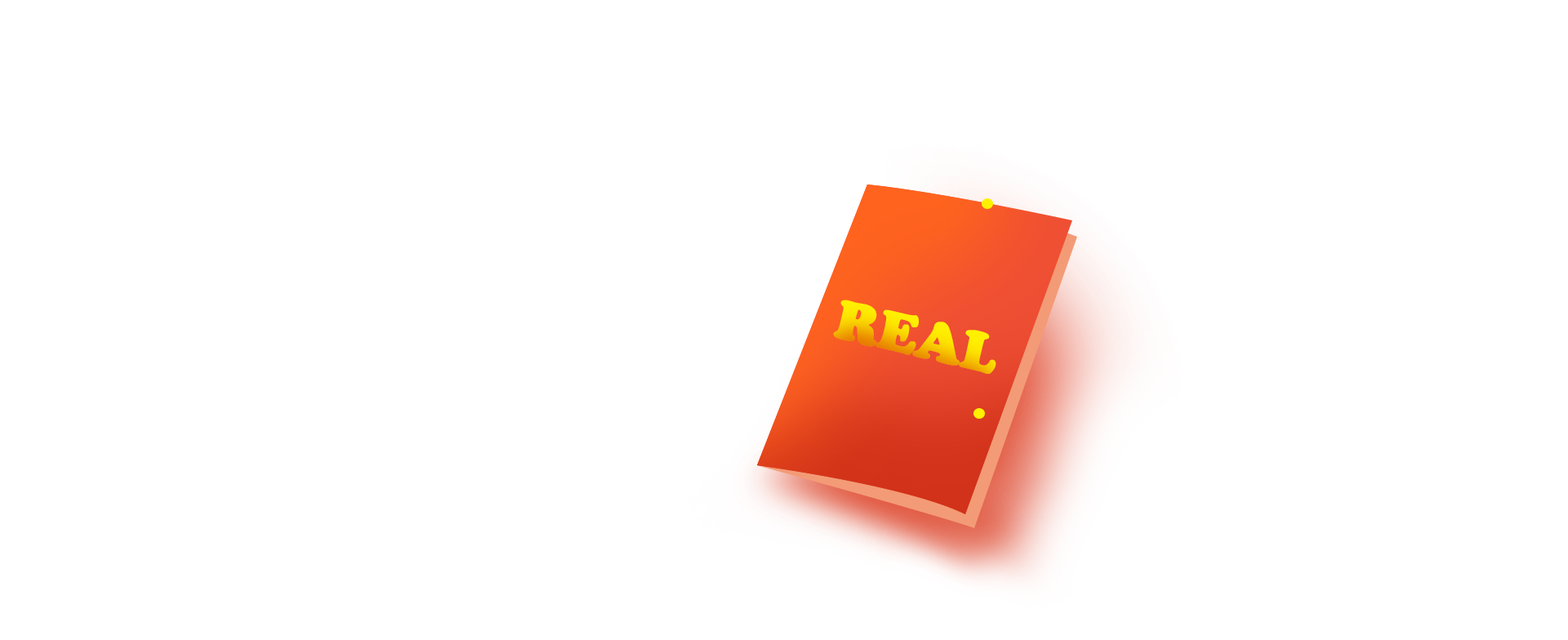
<style>
.page{position:relative;width:1568px;height:640px;background:#ffffff}
.page>*{position:absolute;margin:0}
.t1{font:57px "CooperBlack";letter-spacing:-0.02em;font-weight:bold}
</style>
<div class="page">
<p class="t1" style="left:833px;top:300px;width:163px;height:74px;rotate:13deg">REAL</p>
</div>
